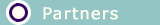
<style>
.page{position:relative;width:160px;height:25px;background:#94c5c5}
.page>*{position:absolute;margin:0}
.t1{font:16px "Verdana";letter-spacing:0.055em;color:#fffff0;font-weight:bold}
</style>
<div class="page">
<p class="t1" style="left:43px;top:7px;width:75px;height:13px">Partners</p>
</div>
